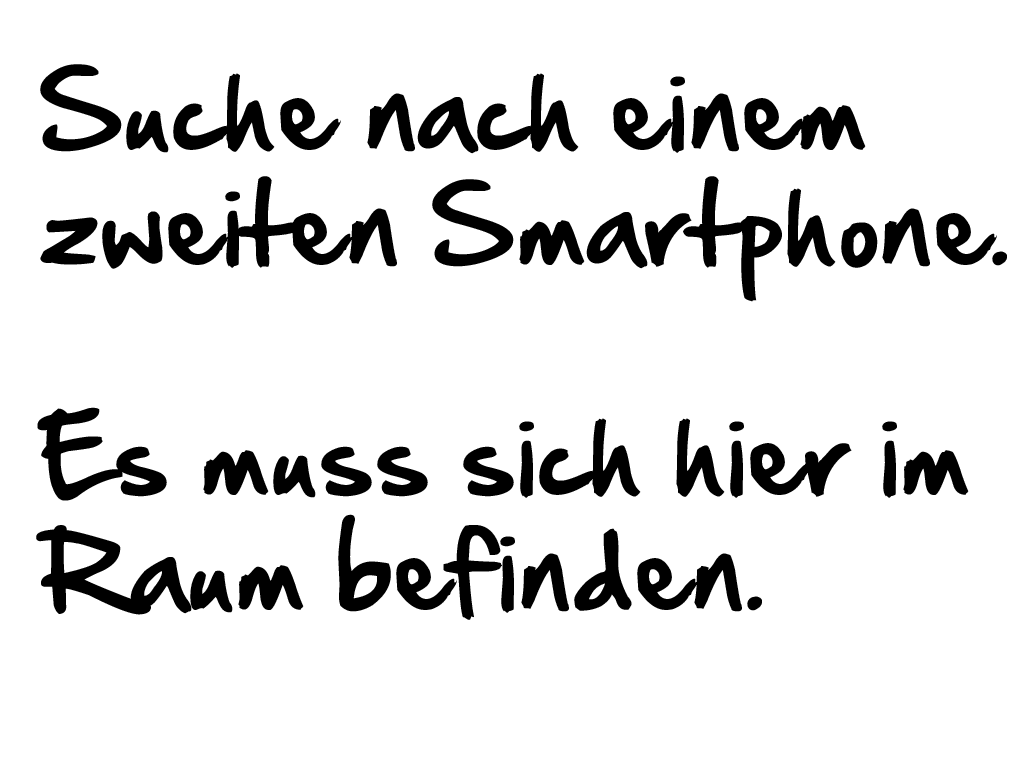
<style>
.page{position:relative;width:1024px;height:768px;background:#ffffff}
.page>*{position:absolute;margin:0}
.t1{font:96px "HandOfSean";letter-spacing:0.01em;color:#000000}
</style>
<div class="page">
<p class="t1" style="left:36px;top:64px;width:971px;height:556px">Suche nach einem<br>zweiten Smartphone.<br><br>Es muss sich hier im<br>Raum befinden.</p>
</div>
